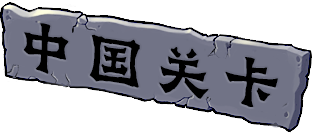
<style>
.page{position:relative;width:312px;height:133px;background:#ffffff}
.page>*{position:absolute;margin:0}
.t1{font:67.8px "GraveBustedStoneLishuSCRoughlyC";letter-spacing:0.14em;color:#000000}
</style>
<div class="page">
<p class="t1" style="left:23px;top:23px;width:255px;height:84px;rotate:9deg">中国关卡</p>
</div>
